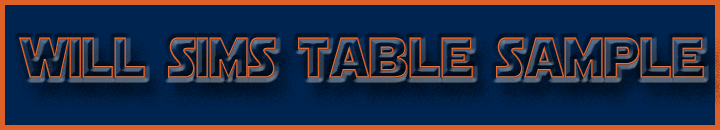
<style>
.page{position:relative;width:720px;height:130px;background:#002450}
.page>*{position:absolute;margin:0}
.t1{font:57.4px "StarJediHollow";color:#dd6026;scale:0.87 1}
</style>
<div class="page">
<p class="t1" style="left:19px;top:37px;width:685px;height:41px">will sims table sample</p>
</div>
